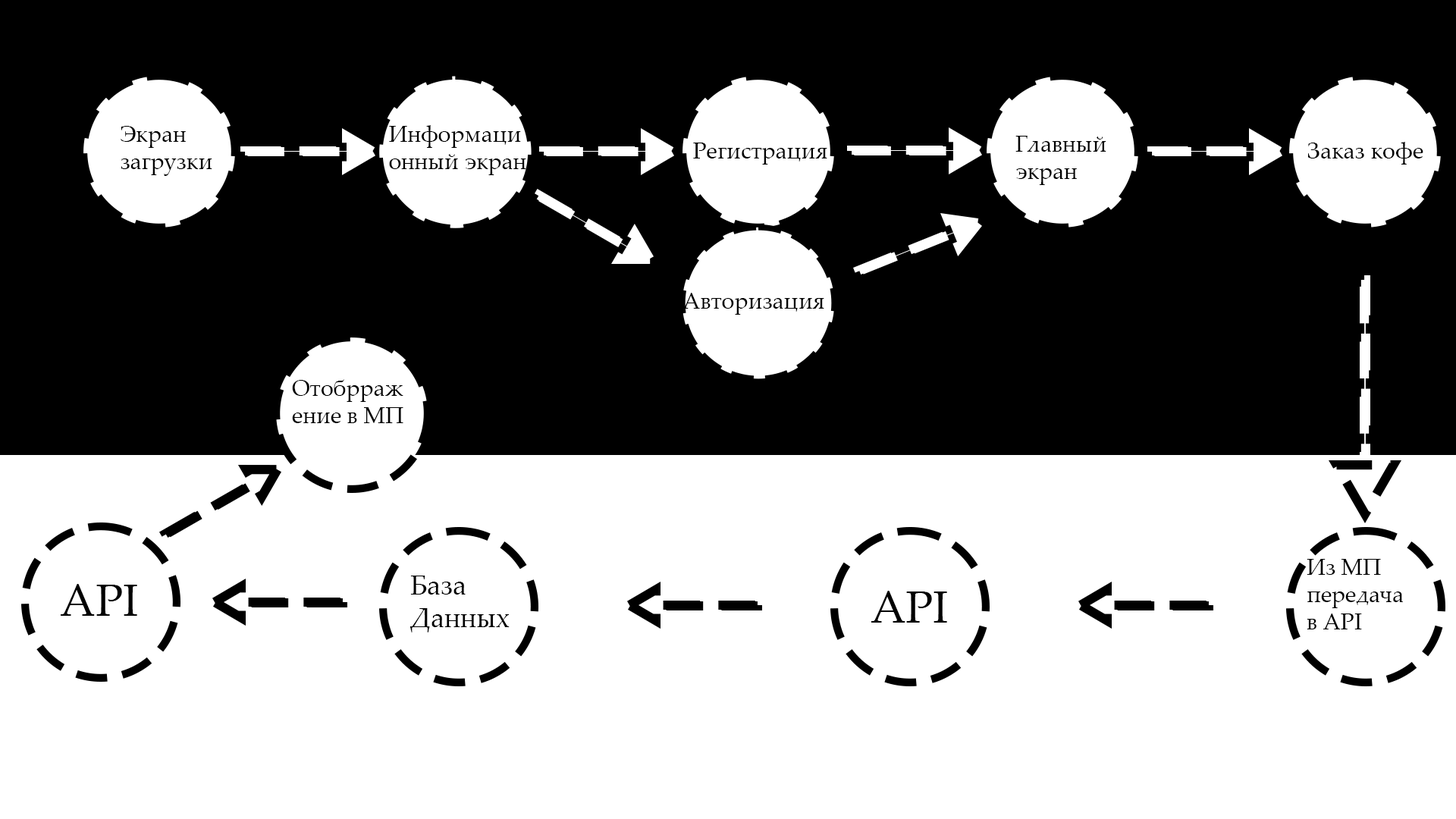
<style>
.page{position:relative;width:1456px;height:819px;background:#ffffff}
.page>*{position:absolute;margin:0}
.t1{font:22.7px "PalatinoLinotype-Roman";color:#000000}
.t2{font:27.3px "PalatinoLinotype-Roman";color:#000000}
.t3{font:45.5px "PalatinoLinotype-Roman";color:#000000}
</style>
<div class="page">
<p class="t1" style="left:121px;top:126px;width:91px;height:50px">Экран загрузки</p>
<p class="t1" style="left:389px;top:125px;width:137px;height:50px">Информационный экран</p>
<p class="t1" style="left:1015px;top:136px;width:91px;height:49px">Главный экран</p>
<p class="t1" style="left:693px;top:143px;width:134px;height:22px">Регистрация</p>
<p class="t1" style="left:1307px;top:142px;width:116px;height:23px">Заказ кофе</p>
<p class="t1" style="left:682px;top:293px;width:142px;height:22px">Авторизация</p>
<p class="t1" style="left:292px;top:379px;width:111px;height:44px">Отобрражение в МП</p>
<p class="t1" style="left:1307px;top:559px;width:96px;height:70px">Из МП <br>передача<br>в API</p>
<p class="t2" style="left:409px;top:576px;width:101px;height:56px">База <br>Данных</p>
<p class="t3" style="left:61px;top:584px;width:76px;height:32px">API</p>
<p class="t3" style="left:871px;top:591px;width:76px;height:32px">API</p>
</div>
